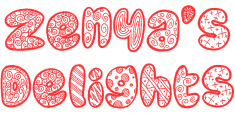
<style>
.page{position:relative;width:235px;height:113px;background:#ffffff}
.page>*{position:absolute;margin:0}
.t1{font:24px "DoodleGum";color:#ff3333}
</style>
<div class="page">
<p class="t1" style="left:0px;top:5px;width:235px;height:104px;text-align:center">Zenya’s<br><br>Delights</p>
</div>
